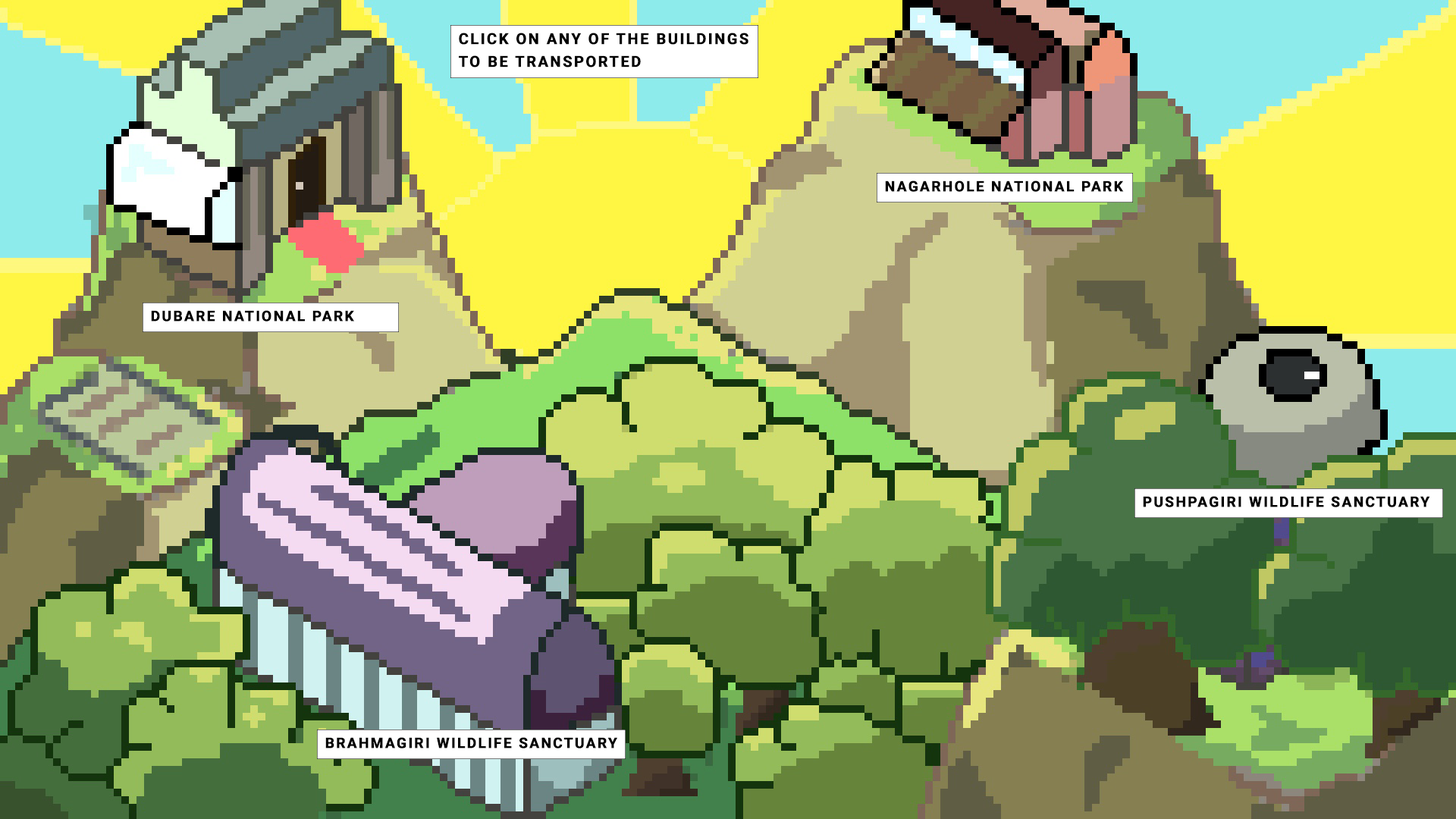
<style>
.page{position:relative;width:1456px;height:819px}
.page>*{position:absolute;margin:0}
.t1{font:15.2px/22.7px "Roboto-Bold";letter-spacing:0.1em;color:#000000;text-transform:uppercase;font-weight:bold}
.t2{font:14.4px "Roboto-Bold";letter-spacing:0.1em;color:#000000;text-transform:uppercase;font-weight:bold}
</style>
<div class="page">
<p class="t1" style="left:459px;top:33px;width:289px;height:34px">Click on any of the buildings to be transported</p>
<p class="t2" style="left:885px;top:180px;width:239px;height:12px">Nagarhole National Park</p>
<p class="t2" style="left:151px;top:310px;width:203px;height:12px">Dubare National Park</p>
<p class="t2" style="left:1143px;top:496px;width:287px;height:11px">Pushpagiri Wildlife Sanctuary</p>
<p class="t2" style="left:325px;top:737px;width:292px;height:11px">Brahmagiri Wildlife Sanctuary</p>
</div>
